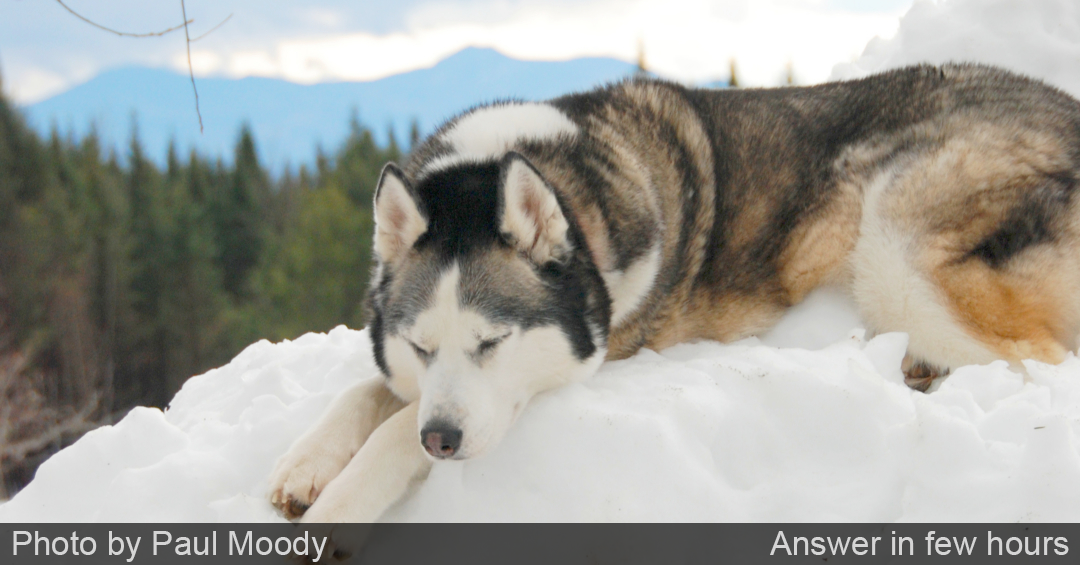
<style>
.page{position:relative;width:1080px;height:565px}
.page>*{position:absolute;margin:0}
.t1{font:33.3px "ArialMT";color:#d5d5d5}
</style>
<div class="page">
<p class="t1" style="left:13px;top:531px;width:314px;height:31px">Photo by Paul Moody</p>
<p class="t1" style="left:770px;top:531px;width:299px;height:24px">Answer in few hours</p>
</div>
